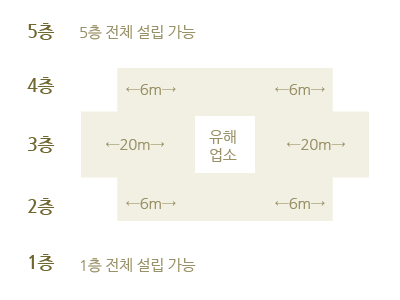
<style>
.page{position:relative;width:400px;height:300px;background:#ffffff}
.page>*{position:absolute;margin:0}
.t1{font:18px "NanumGothicBold";letter-spacing:-0.025em;color:#70662f}
.t2{font:15px "NanumGothic";letter-spacing:-0.025em;color:#999167}
</style>
<div class="page">
<p class="t1" style="left:28px;top:23px;width:27px;height:17px">5층</p>
<p class="t2" style="left:80px;top:25px;width:116px;height:15px">5층 전체 설립 가능</p>
<p class="t1" style="left:27px;top:77px;width:28px;height:17px">4층</p>
<p class="t2" style="left:126px;top:84px;width:50px;height:11px">←6m→</p>
<p class="t2" style="left:275px;top:84px;width:50px;height:11px">←6m→</p>
<p class="t1" style="left:28px;top:136px;width:27px;height:17px">3층</p>
<p class="t2" style="left:209px;top:130px;width:28px;height:32px;text-align:center">유해<br>업소</p>
<p class="t2" style="left:106px;top:139px;width:58px;height:11px">←20m→</p>
<p class="t2" style="left:287px;top:139px;width:58px;height:11px">←20m→</p>
<p class="t1" style="left:28px;top:198px;width:27px;height:17px">2층</p>
<p class="t2" style="left:126px;top:198px;width:50px;height:11px">←6m→</p>
<p class="t2" style="left:275px;top:198px;width:50px;height:11px">←6m→</p>
<p class="t1" style="left:29px;top:254px;width:26px;height:17px">1층</p>
<p class="t2" style="left:81px;top:258px;width:115px;height:15px">1층 전체 설립 가능</p>
</div>
